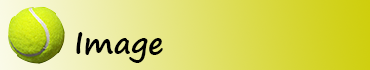
<style>
.page{position:relative;width:370px;height:70px}
.page>*{position:absolute;margin:0}
.t1{font:30px "SegoePrint-Bold";color:#000000}
</style>
<div class="page">
<p class="t1" style="left:76px;top:32px;width:87px;height:31px">Image</p>
</div>
